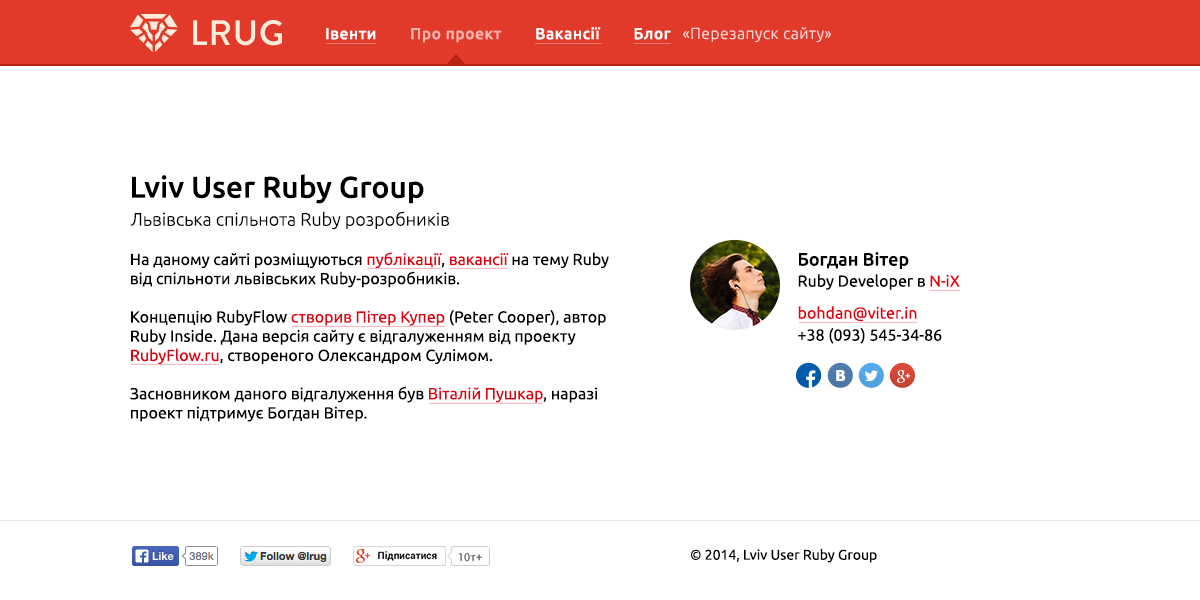
<style>
.page{position:relative;width:1200px;height:600px;background:#ffffff}
.page>*{position:absolute;margin:0}
.t1{font:16px "Ubuntu-Medium";letter-spacing:0.034em;color:#ffffff}
.t2{font:16px "Ubuntu-Medium";letter-spacing:0.034em;color:#ffb4ad}
.t3{font:16px "Ubuntu-Light";letter-spacing:0.034em;color:#f6d1cf}
.t4{font:30px "Ubuntu-Medium";color:#000000}
.t5{font:18px "Ubuntu-Light";color:#000000}
.t6{font:16px "Ubuntu";color:#000000}
.t7{font:16px "Ubuntu";color:#e3000e}
.t8{font:18px "Ubuntu-Medium";color:#000000}
.t9{font:16px/22px "Ubuntu";color:#000000}
.t10{font:16px/22px "Ubuntu";color:#e3000e}
.t11{font:15px "Tahoma-Bold";color:#ffffff}
.t12{font:14px "Ubuntu";color:#000000}
</style>
<div class="page">
<p class="t1" style="left:326px;top:27px;width:345px;height:16px">Івенти        <span class="t2">Про проект        </span>Вакансії        Блог</p>
<p class="t3" style="left:683px;top:27px;width:149px;height:16px">«Перезапуск сайту»</p>
<p class="t4" style="left:132px;top:174px;width:292px;height:30px">Lviv User Ruby Group</p>
<p class="t5" style="left:130px;top:211px;width:319px;height:19px">Львівська спільнота Ruby розробників</p>
<p class="t6" style="left:130px;top:252px;width:479px;height:170px">На даному сайті розміщуються <span class="t7">публікації</span>, <span class="t7">вакансії </span>на тему Ruby від спільноти львівських Ruby-розробників.<br> <br>Концепцію RubyFlow <span class="t7">створив Пітер Купер </span>(Peter Cooper), автор Ruby Inside. Дана версія сайту є відгалуженням від проекту <span class="t7">RubyFlow.ru</span>, створеного Олександром Сулімом.<br> <br>Засновником даного відгалуження був <span class="t7">Віталій Пушкар</span>, наразі проект підтримує Богдан Вітер.</p>
<p class="t8" style="left:799px;top:252px;width:110px;height:17px">Богдан Вітер</p>
<p class="t6" style="left:798px;top:274px;width:162px;height:16px">Ruby Developer в <span class="t7">N-iX</span></p>
<p class="t9" style="left:798px;top:306px;width:144px;height:38px"><span class="t10">bohdan@viter.in<br></span>+38 (093) 545-34-86</p>
<p class="t11" style="left:836px;top:370px;width:10px;height:11px">В</p>
<p class="t12" style="left:690px;top:548px;width:187px;height:15px">© 2014, Lviv User Ruby Group</p>
</div>
